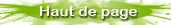
<style>
.page{position:relative;width:171px;height:25px}
.page>*{position:absolute;margin:0}
.t1{font:14px "ArialRoundedMTBold";color:#ffffff;scale:1.1 1}
</style>
<div class="page">
<p class="t1" style="left:39px;top:6px;width:98px;height:13px">Haut de page</p>
</div>
